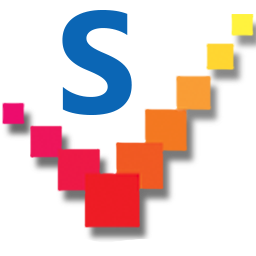
<style>
.page{position:relative;width:256px;height:256px;background:#ffffff}
.page>*{position:absolute;margin:0}
.t1{font:144.5px "SegoeUI-Bold";color:#0b66b5}
</style>
<div class="page">
<p class="t1" style="left:62px;top:10px;width:70px;height:105px">S</p>
</div>
